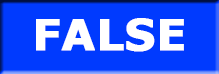
<style>
.page{position:relative;width:219px;height:74px;background:#003afe}
.page>*{position:absolute;margin:0}
.t1{font:43px "Verdana-Bold";color:#ffffff;font-weight:bold}
</style>
<div class="page">
<p class="t1" style="left:36px;top:18px;width:148px;height:34px">FALSE</p>
</div>
